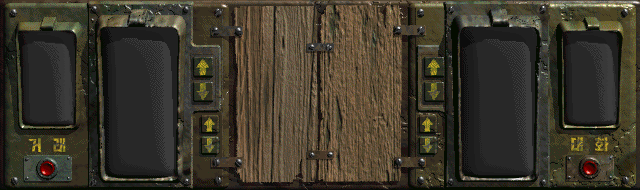
<style>
.page{position:relative;width:640px;height:190px}
.page>*{position:absolute;margin:0}
.t1{font:15px "HakgyoansimPosterB"}
</style>
<div class="page">
<p class="t1" style="left:571px;top:137px;width:38px;height:15px">대   화</p>
<p class="t1" style="left:28px;top:138px;width:38px;height:14px">거   래</p>
</div>
